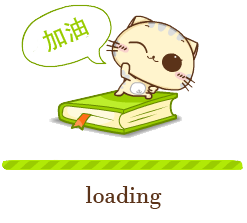
<style>
.page{position:relative;width:247px;height:223px;background:#ffffff}
.page>*{position:absolute;margin:0}
.t1{font:24px "AdobeHeitiStd-Regular";color:#99cc00}
.t2{font:24px "JavaneseText";color:#5b3319}
</style>
<div class="page">
<p class="t1" style="left:42px;top:17px;width:48px;height:35px;rotate:-24deg">加油</p>
<p class="t2" style="left:86px;top:186px;width:76px;height:23px">loading</p>
</div>
